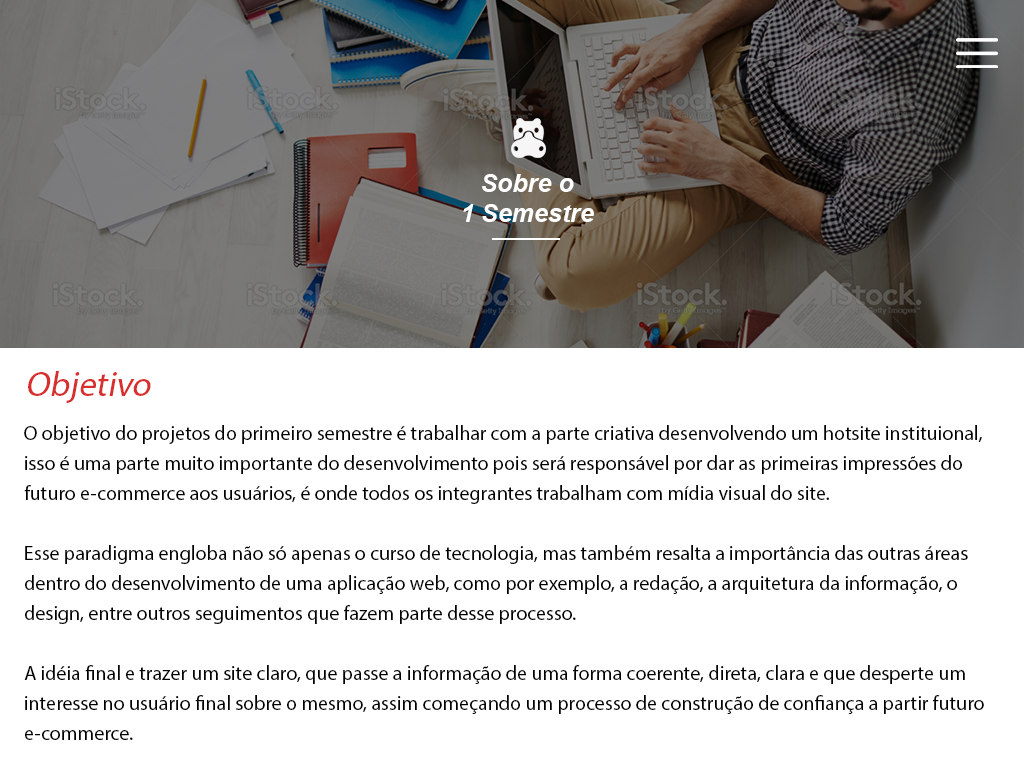
<style>
.page{position:relative;width:1024px;height:768px;background:#ffffff}
.page>*{position:absolute;margin:0}
.t1{font:25px "Arial-BoldItalicMT";color:#ffffff}
.t2{font:35px "MyriadPro-Regular";color:#d82e2e;font-style:italic}
.t3{font:20px/30px "MyriadPro-Regular";color:#000000}
</style>
<div class="page">
<p class="t1" style="left:463px;top:174px;width:131px;height:48px;text-align:center">Sobre o<br>1 Semestre</p>
<p class="t2" style="left:28px;top:371px;width:123px;height:32px">Objetivo</p>
<p class="t3" style="left:24px;top:425px;width:960px;height:315px">O objetivo do projetos do primeiro semestre é trabalhar com a parte criativa desenvolvendo um hotsite instituional, isso é uma parte muito importante do desenvolvimento pois será responsável por dar as primeiras impressões do futuro e-commerce aos usuários, é onde todos os integrantes trabalham com mídia visual do site.<br><br>Esse paradigma engloba não só apenas o curso de tecnologia, mas também resalta a importância das outras áreas dentro do desenvolvimento de uma aplicação web, como por exemplo, a redação, a arquitetura da informação, o design, entre outros seguimentos que fazem parte desse processo.<br><br>A idéia final e trazer um site claro, que passe a informação de uma forma coerente, direta, clara e que desperte um interesse no usuário final sobre o mesmo, assim começando um processo de construção de confiança a partir futuro e-commerce.</p>
</div>
